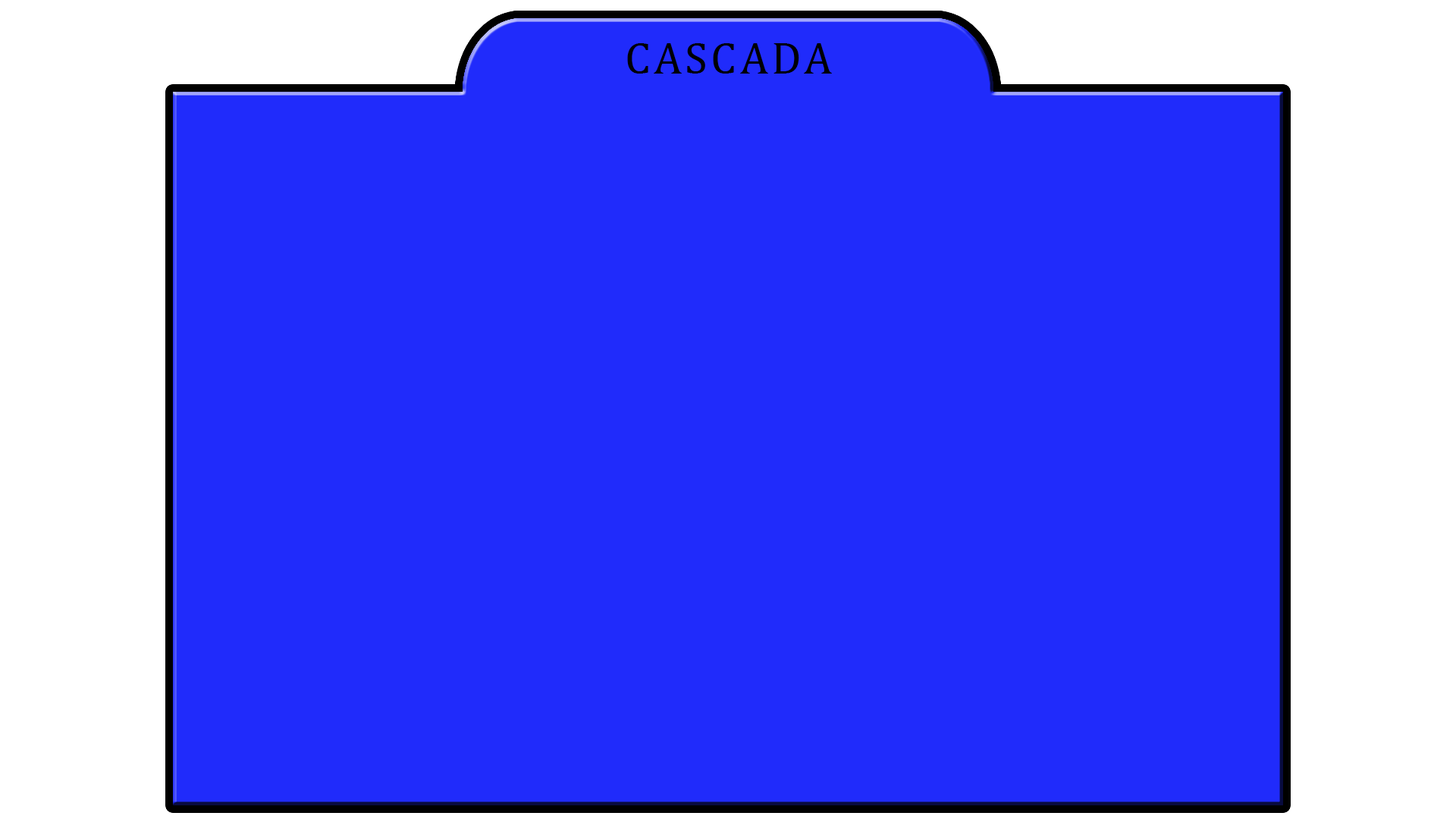
<style>
.page{position:relative;width:1456px;height:819px;background:#202bfb}
.page>*{position:absolute;margin:0}
.t1{font:45.5px "Cambria";letter-spacing:0.075em;color:#000000}
</style>
<div class="page">
<p class="t1" style="left:627px;top:43px;width:205px;height:31px">CASCADA</p>
</div>
